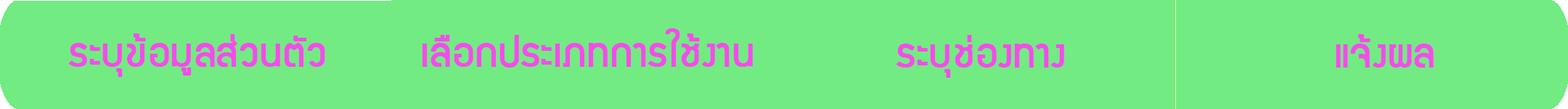
<style>
.page{position:relative;width:1568px;height:109px;background:#72eb83}
.page>*{position:absolute;margin:0}
.t1{font:43.6px "supermarket";color:#f24de8;font-weight:bold}
</style>
<div class="page">
<p class="t1" style="left:422px;top:28px;width:331px;height:40px">เลือกประเภทการใช้งาน</p>
<p class="t1" style="left:68px;top:33px;width:257px;height:44px">ระบุข้อมูลส่วนตัว</p>
<p class="t1" style="left:896px;top:35px;width:168px;height:43px">ระบุช่องทาง</p>
<p class="t1" style="left:1336px;top:34px;width:98px;height:34px">แจ้งผล</p>
</div>
